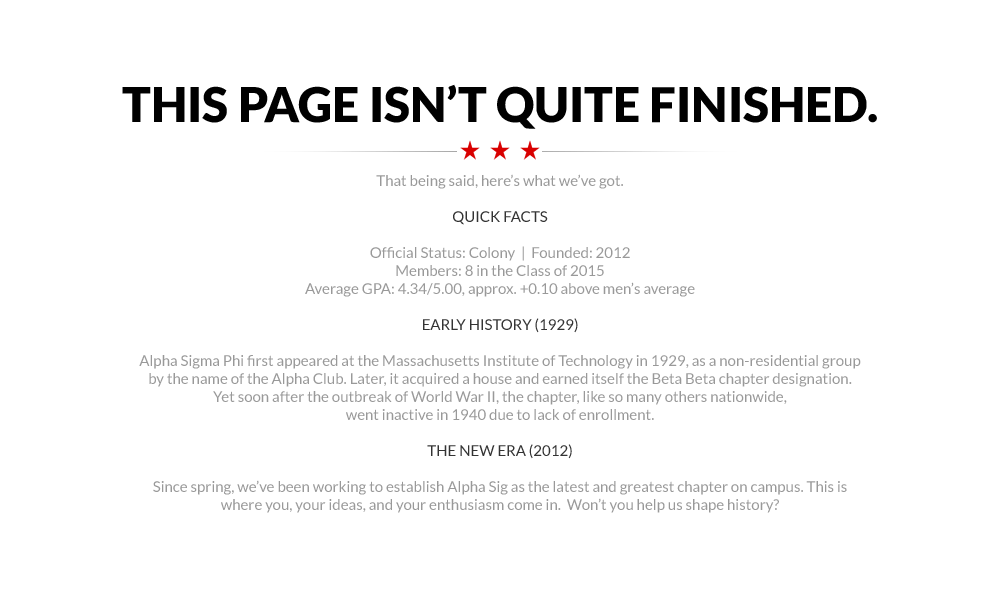
<style>
.page{position:relative;width:1000px;height:600px;background:#ffffff}
.page>*{position:absolute;margin:0}
.t1{font:15px/18px "Lato-Regular";color:#999999}
.t2{font:48px/36px "Lato-Black";color:#000000}
.t3{font:15px/18px "Lato-Regular";color:#333333}
</style>
<div class="page">
<p class="t1" style="left:122px;top:84px;width:755px;height:429px;text-align:center"><span class="t2">THIS PAGE ISN’T QUITE FINISHED.<br><br></span><br><br>That being said, here’s what we’ve got.<br><br><span class="t3">QUICK FACTS<br><br></span>Official Status: Colony  |  Founded: 2012<br>Members: 8 in the Class of 2015<br>Average GPA: 4.34/5.00, approx. +0.10 above men’s average<br><br><span class="t3">EARLY HISTORY (1929)<br><br></span>Alpha Sigma Phi first appeared at the Massachusetts Institute of Technology in 1929, as a non-residential group<br>by the name of the Alpha Club. Later, it acquired a house and earned itself the Beta Beta chapter designation.<br>Yet soon after the outbreak of World War II, the chapter, like so many others nationwide,<br>went inactive in 1940 due to lack of enrollment.<br><br><span class="t3">THE NEW ERA (2012)<br><br></span>Since spring, we’ve been working to establish Alpha Sig as the latest and greatest chapter on campus. This is<br>where you, your ideas, and your enthusiasm come in.  Won’t you help us shape history?</p>
</div>
